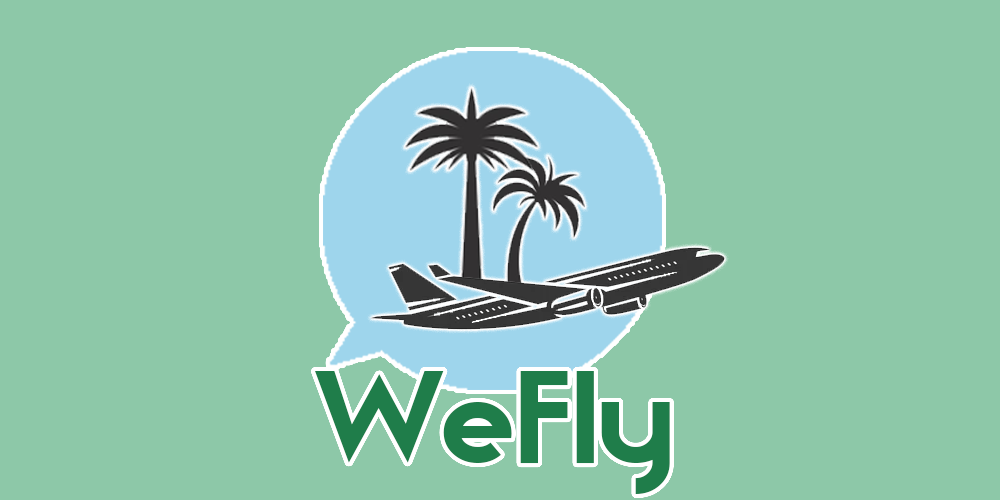
<style>
.page{position:relative;width:1000px;height:500px;background:#8dc8a8}
.page>*{position:absolute;margin:0}
.t1{font:115.8px "Moderna";color:#1f7d4a;scale:1.09 1}
</style>
<div class="page">
<p class="t1" style="left:315px;top:371px;width:355px;height:123px">WeFly</p>
</div>
